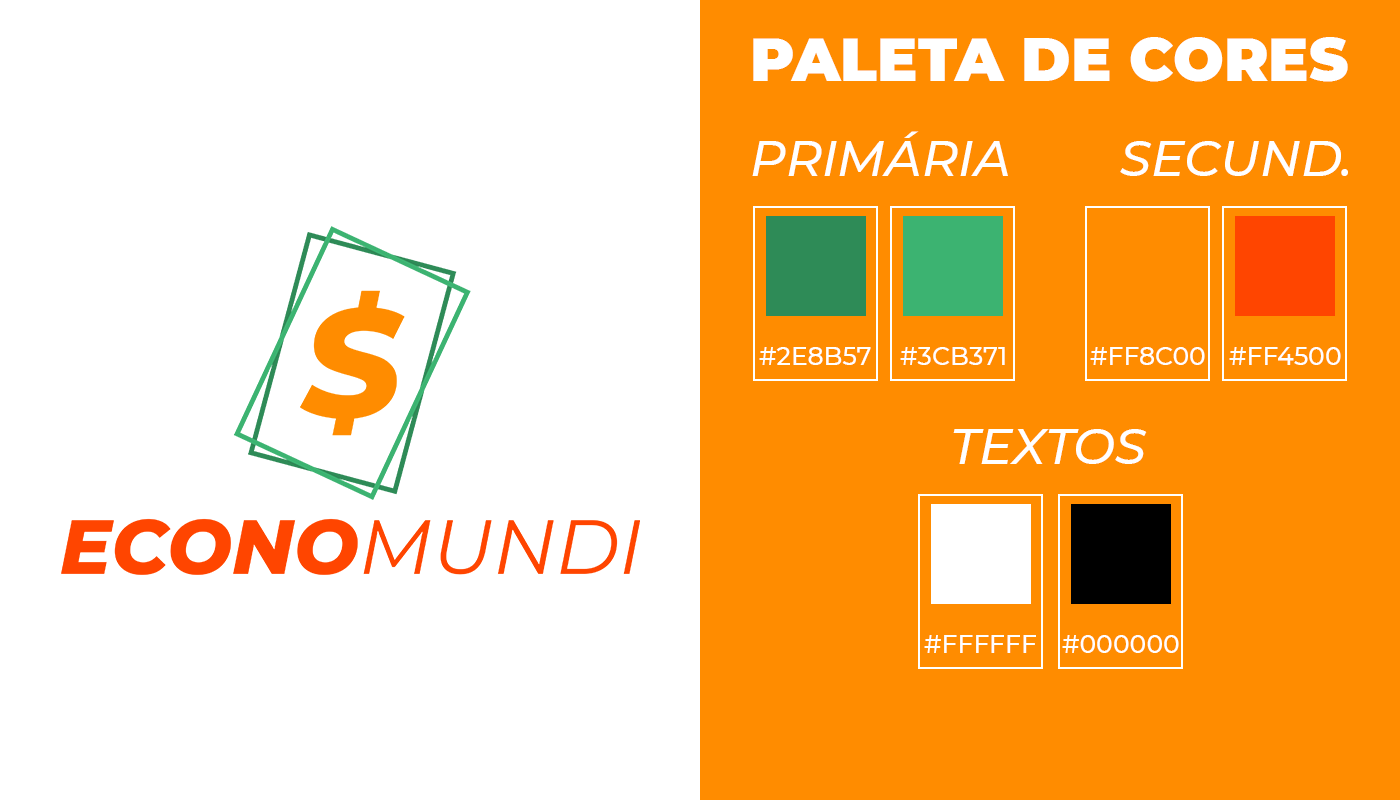
<style>
.page{position:relative;width:1400px;height:800px;background:#ffffff}
.page>*{position:absolute;margin:0}
.t1{font:60px "Montserrat-Black";color:#ffffff}
.t2{font:50px "Montserrat-MediumItalic";color:#ffffff}
.t3{font:25px "Montserrat-Medium";color:#ffffff}
</style>
<div class="page">
<p class="t1" style="left:753px;top:37px;width:595px;height:45px">PALETA DE CORES</p>
<p class="t2" style="left:752px;top:131px;width:256px;height:45px">PRIMÁRIA</p>
<p class="t2" style="left:1120px;top:141px;width:228px;height:35px">SECUND.</p>
<p class="t3" style="left:759px;top:347px;width:112px;height:18px">#2E8B57</p>
<p class="t3" style="left:900px;top:347px;width:105px;height:18px">#3CB371</p>
<p class="t3" style="left:1090px;top:347px;width:115px;height:18px">#FF8C00</p>
<p class="t3" style="left:1229px;top:347px;width:112px;height:18px">#FF4500</p>
<p class="t2" style="left:953px;top:429px;width:194px;height:35px">TEXTOS</p>
<p class="t3" style="left:924px;top:635px;width:112px;height:18px">#FFFFFF</p>
<p class="t3" style="left:1062px;top:635px;width:117px;height:18px">#000000</p>
</div>
